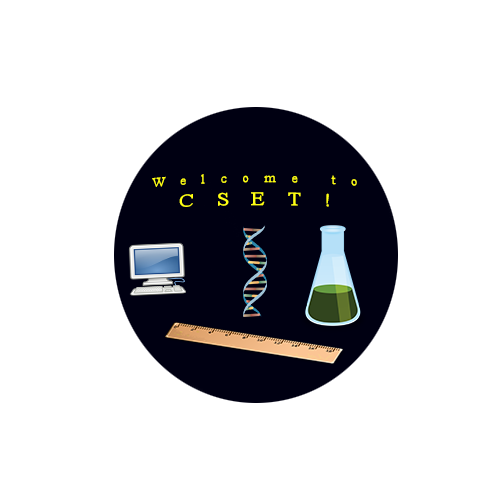
<style>
.page{position:relative;width:500px;height:500px;background:#ffffff}
.page>*{position:absolute;margin:0}
.t1{font:12px "TimesNewRomanPSMT";letter-spacing:0.985em;color:#ffff12;scale:1.26 1}
.t2{font:18px "TimesNewRomanPSMT";letter-spacing:0.985em;color:#ffff12;scale:1.26 1}
</style>
<div class="page">
<p class="t1" style="left:152px;top:174px;width:205px;height:33px;text-align:center">Welcome to<br><span class="t2">CSET!</span></p>
</div>
